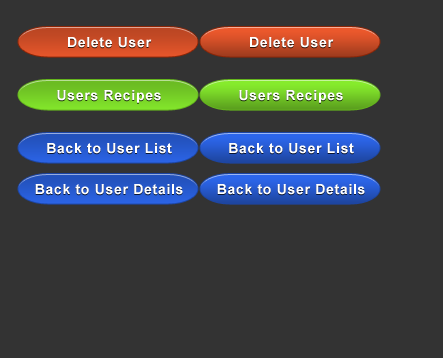
<style>
.page{position:relative;width:443px;height:358px;background:#333333}
.page>*{position:absolute;margin:0}
.t1{font:14px "Arial-BoldMT";letter-spacing:0.05em;color:#ffffff}
</style>
<div class="page">
<p class="t1" style="left:68px;top:37px;width:84px;height:11px">Delete User</p>
<p class="t1" style="left:250px;top:37px;width:84px;height:11px">Delete User</p>
<p class="t1" style="left:57px;top:90px;width:104px;height:13px">Users Recipes</p>
<p class="t1" style="left:239px;top:90px;width:104px;height:13px">Users Recipes</p>
<p class="t1" style="left:47px;top:143px;width:125px;height:11px">Back to User List</p>
<p class="t1" style="left:229px;top:143px;width:125px;height:11px">Back to User List</p>
<p class="t1" style="left:35px;top:184px;width:148px;height:11px">Back to User Details</p>
<p class="t1" style="left:217px;top:184px;width:148px;height:11px">Back to User Details</p>
</div>
